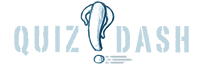
<style>
.page{position:relative;width:203px;height:65px;background:#ffffff}
.page>*{position:absolute;margin:0}
.t1{font:36.4px "PortagoITCTT";letter-spacing:0.11em;color:#bdd6e0;text-transform:uppercase}
</style>
<div class="page">
<p class="t1" style="left:14px;top:25px;width:65px;height:31px">quiz</p>
<p class="t1" style="left:116px;top:26px;width:73px;height:27px">dash</p>
</div>
